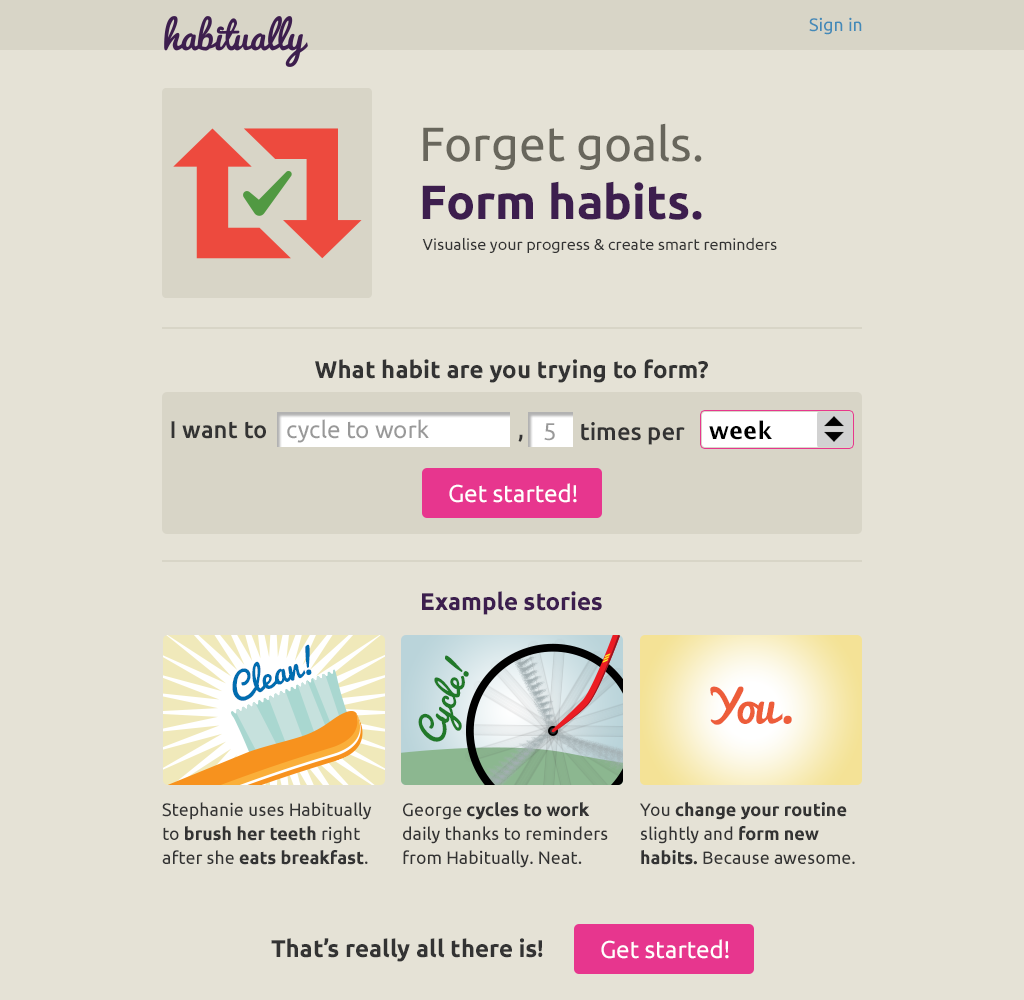
<style>
.page{position:relative;width:1024px;height:1000px;background:#e5e2d6}
.page>*{position:absolute;margin:0}
.t1{font:18px "Ubuntu";color:#438ab8}
.t2{font:48px "Ubuntu";color:#68665c}
.t3{font:48px "Ubuntu-Bold";color:#3d1e4e}
.t4{font:16px "Ubuntu";color:#333333}
.t5{font:24px "Ubuntu-Bold";color:#333333}
.t6{font:24px "Ubuntu-Medium";color:#333333}
.t7{font:24px "Ubuntu";color:#999999}
.t8{font:24px "LucidaGrande-Bold";color:#000000}
.t9{font:24px "Ubuntu";color:#ffffff}
.t10{font:24px "Ubuntu-Bold";color:#3c1e4e}
.t11{font:32px "Pacifico-Regular";color:#006db0}
.t12{font:32px "Pacifico-Regular";color:#217929}
.t13{font:48px "Pacifico-Regular";color:#ed5d3a}
.t14{font:18px/24px "Ubuntu";color:#333333}
.t15{font:18px/24px "Ubuntu-Bold";color:#333333}
</style>
<div class="page">
<p class="t1" style="left:809px;top:17px;width:53px;height:18px">Sign in</p>
<p class="t2" style="left:422px;top:123px;width:280px;height:97px">Forget goals.<br><span class="t3">Form habits.</span></p>
<p class="t4" style="left:422px;top:237px;width:355px;height:16px">Visualise your progress &amp; create smart reminders</p>
<p class="t5" style="left:315px;top:359px;width:393px;height:24px">What habit are you trying to form?</p>
<p class="t6" style="left:171px;top:421px;width:95px;height:18px">I want to</p>
<p class="t7" style="left:287px;top:419px;width:142px;height:24px">cycle to work</p>
<p class="t7" style="left:544px;top:423px;width:11px;height:18px">5</p>
<p class="t6" style="left:581px;top:422px;width:104px;height:23px">times per</p>
<p class="t8" style="left:709px;top:420px;width:63px;height:20px">week</p>
<p class="t6" style="left:518px;top:434px;width:5px;height:8px">,</p>
<p class="t9" style="left:449px;top:483px;width:128px;height:20px">Get started!</p>
<p class="t10" style="left:422px;top:591px;width:180px;height:24px">Example stories</p>
<p class="t11" style="left:232px;top:644px;width:80px;height:57px;rotate:-19deg">Clean!</p>
<p class="t12" style="left:418px;top:655px;width:51px;height:87px;rotate:-66deg">Cycle!</p>
<p class="t13" style="left:710px;top:686px;width:82px;height:39px">You.</p>
<p class="t14" style="left:162px;top:802px;width:210px;height:63px">Stephanie uses Habitually to <span class="t15">brush her teeth</span> right after she <span class="t15">eats breakfast</span>.</p>
<p class="t14" style="left:403px;top:802px;width:205px;height:66px">George <span class="t15">cycles to work </span>daily thanks to reminders from Habitually. Neat.</p>
<p class="t15" style="left:640px;top:802px;width:215px;height:63px"><span class="t14">You </span>change your routine <span class="t14">slightly and </span>form new habits.<span class="t14"> Because awesome.</span></p>
<p class="t5" style="left:271px;top:938px;width:272px;height:24px">That’s really all there is!</p>
<p class="t9" style="left:601px;top:939px;width:128px;height:20px">Get started!</p>
</div>
